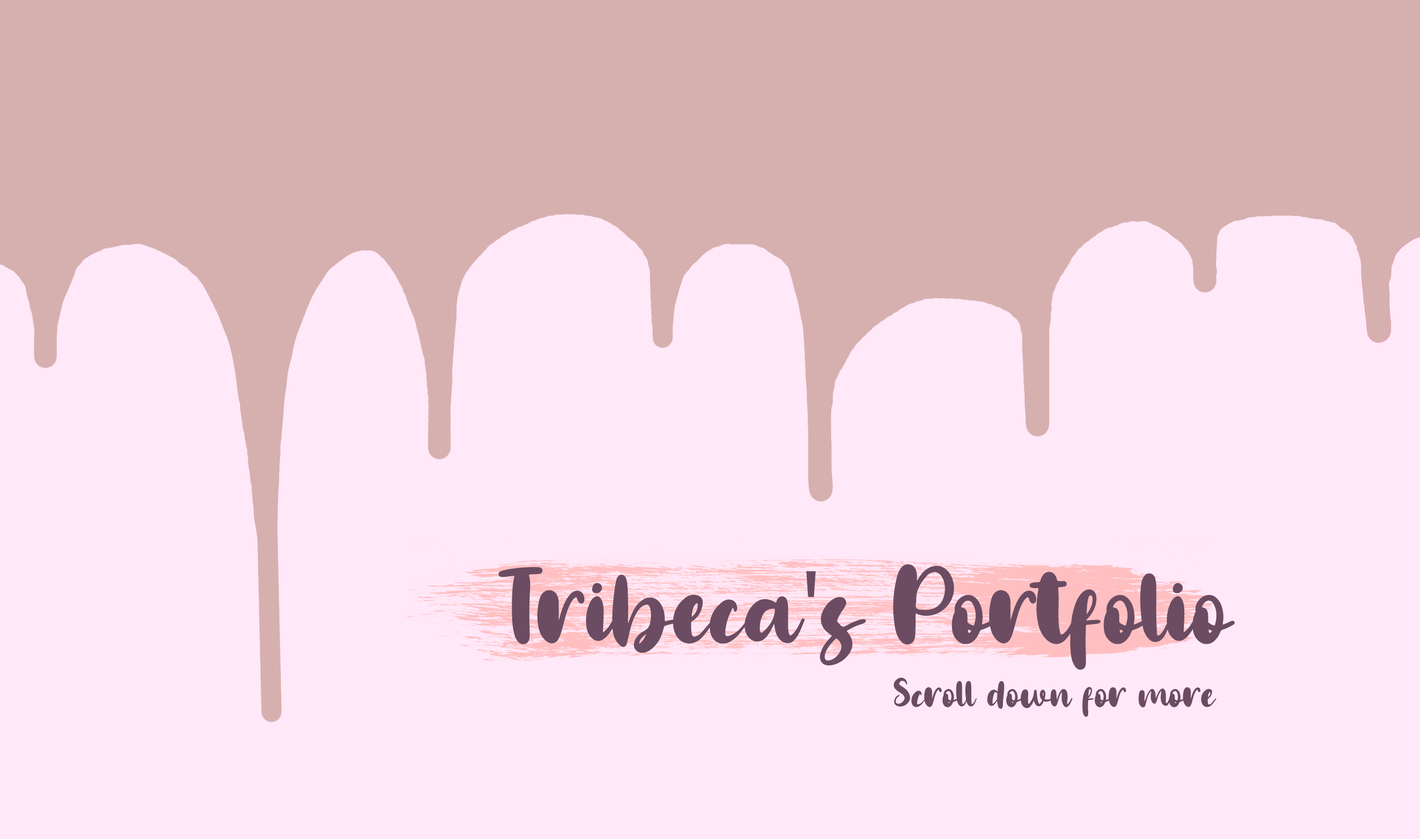
<style>
.page{position:relative;width:1420px;height:839px;background:#ffe8f8}
.page>*{position:absolute;margin:0}
.t1{font:107px "LenaBrushRegular";color:#6b4c62}
.t2{font:107px "MyriadPro-Regular";color:#6b4c62}
.t3{font:39.8px "LenaBrushRegular";color:#6b4c62}
</style>
<div class="page">
<p class="t1" style="left:499px;top:564px;width:737px;height:106px">Tribeca<span class="t2">'</span>s Portfolio</p>
<p class="t3" style="left:894px;top:678px;width:323px;height:39px">Scroll down for more</p>
</div>
